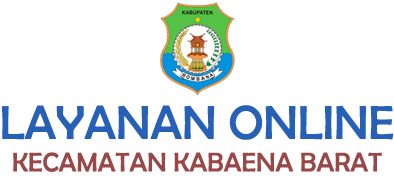
<style>
.page{position:relative;width:394px;height:180px;background:#ffffff}
.page>*{position:absolute;margin:0}
.t1{font:27px "BerlinSansFB-Reg";color:#9a4747}
.t2{font:48px "BerlinSansFB-Reg";color:#2760b7}
</style>
<div class="page">
<p class="t1" style="left:2px;top:105px;width:392px;height:67px;text-align:center"><span class="t2">LAYANAN ONLINE<br></span>KECAMATAN KABAENA BARAT</p>
</div>
